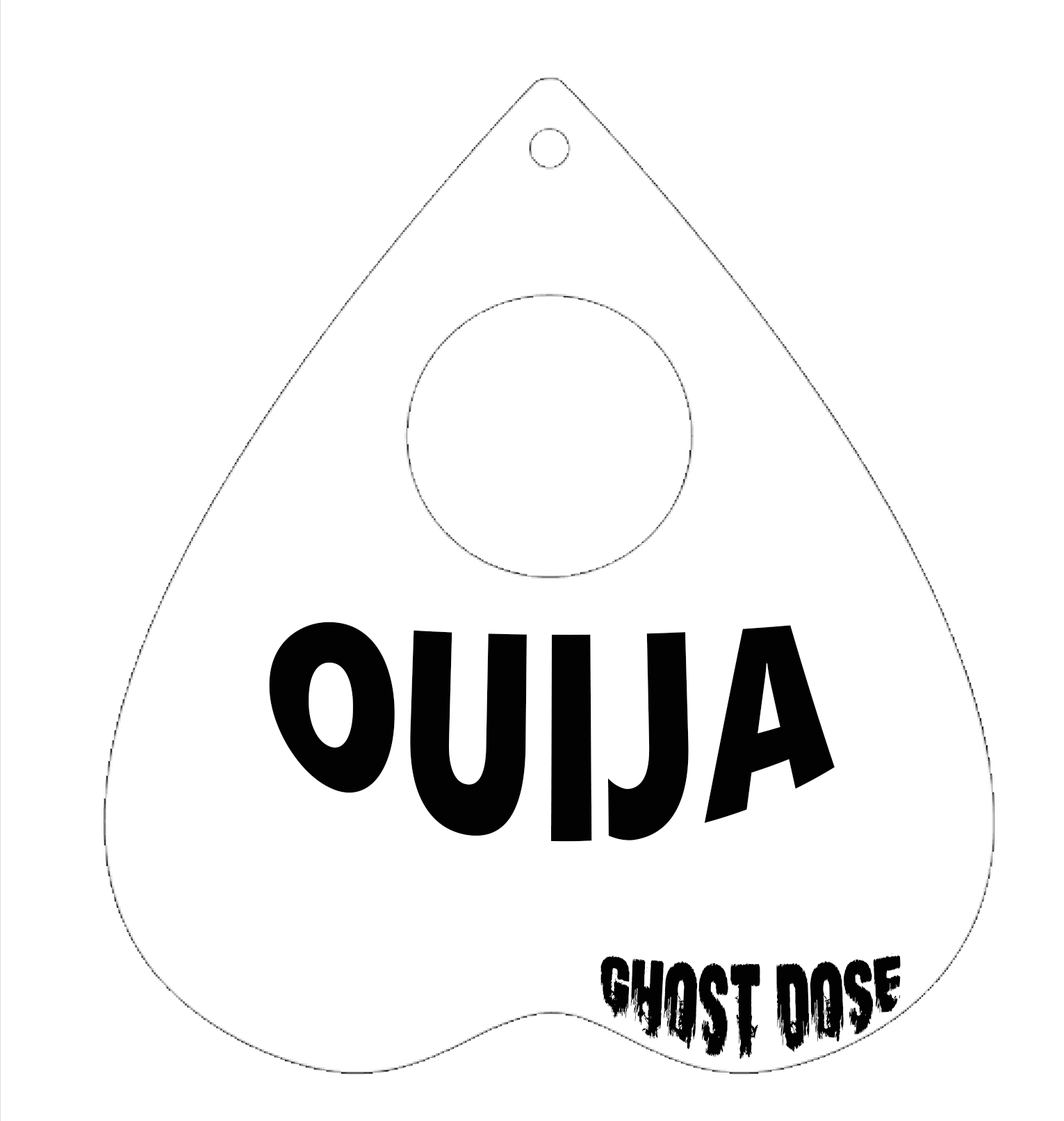
<style>
.page{position:relative;width:1064px;height:1121px;background:#ffffff}
.page>*{position:absolute;margin:0}
.t1{font:182.4px "SegoeUIBlack";color:#020202}
.t2{font:66.7px "ScareArms";color:#020202}
</style>
<div class="page">
<p class="t1" style="left:269px;top:622px;width:565px;height:220px">OUIJA</p>
<p class="t2" style="left:600px;top:953px;width:300px;height:106px">Ghost Dose</p>
</div>
